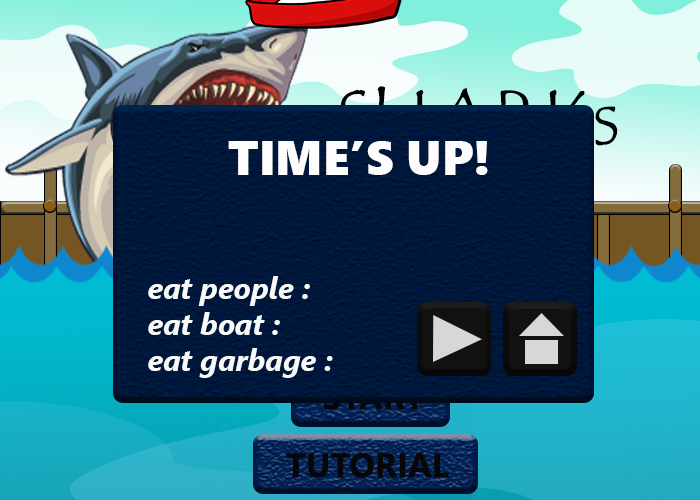
<style>
.page{position:relative;width:700px;height:500px}
.page>*{position:absolute;margin:0}
.t1{font:80px "TempusSansITC"}
.t2{font:48px "SegoeUIBlack";color:#fdfdfd}
.t3{font:30px "SegoeUI-BoldItalic";color:#f7f9f9}
.t4{font:34px "SegoeUI-Bold"}
.t5{font:34px "SegoeUI-Bold";color:#070707}
</style>
<div class="page">
<p class="t1" style="left:339px;top:86px;width:279px;height:62px">SHARKs</p>
<p class="t2" style="left:228px;top:141px;width:260px;height:34px">TIME’S UP!</p>
<p class="t3" style="left:148px;top:276px;width:185px;height:102px">eat people :<br>     eat boat :<br>     eat garbage :</p>
<p class="t4" style="left:323px;top:384px;width:101px;height:26px">START</p>
<p class="t5" style="left:286px;top:452px;width:163px;height:26px">TUTORIAL</p>
</div>
